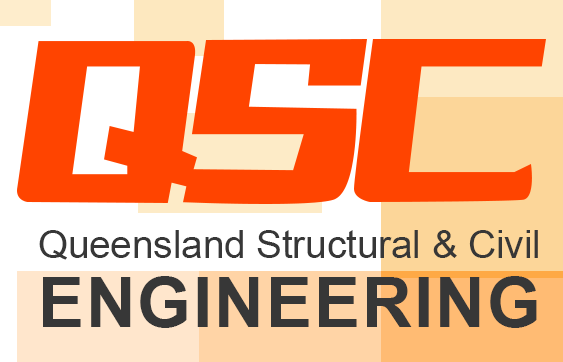
<style>
.page{position:relative;width:563px;height:362px;background:#ff4400}
.page>*{position:absolute;margin:0}
.t1{font:38.5px "ArialMT";color:#373737}
.t2{font:69.4px "Arial-BoldMT";letter-spacing:0.025em;color:#373737}
</style>
<div class="page">
<p class="t1" style="left:39px;top:230px;width:499px;height:30px">Queensland Structural &amp; Civil</p>
<p class="t2" style="left:43px;top:276px;width:494px;height:52px">ENGINEERING</p>
</div>
